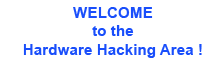
<style>
.page{position:relative;width:224px;height:64px;background:#ffffff}
.page>*{position:absolute;margin:0}
.t1{font:15.3px "Arial-BoldMT";color:#194efb}
</style>
<div class="page">
<p class="t1" style="left:23px;top:7px;width:179px;height:51px;text-align:center">WELCOME<br>to the<br>Hardware Hacking Area !</p>
</div>
